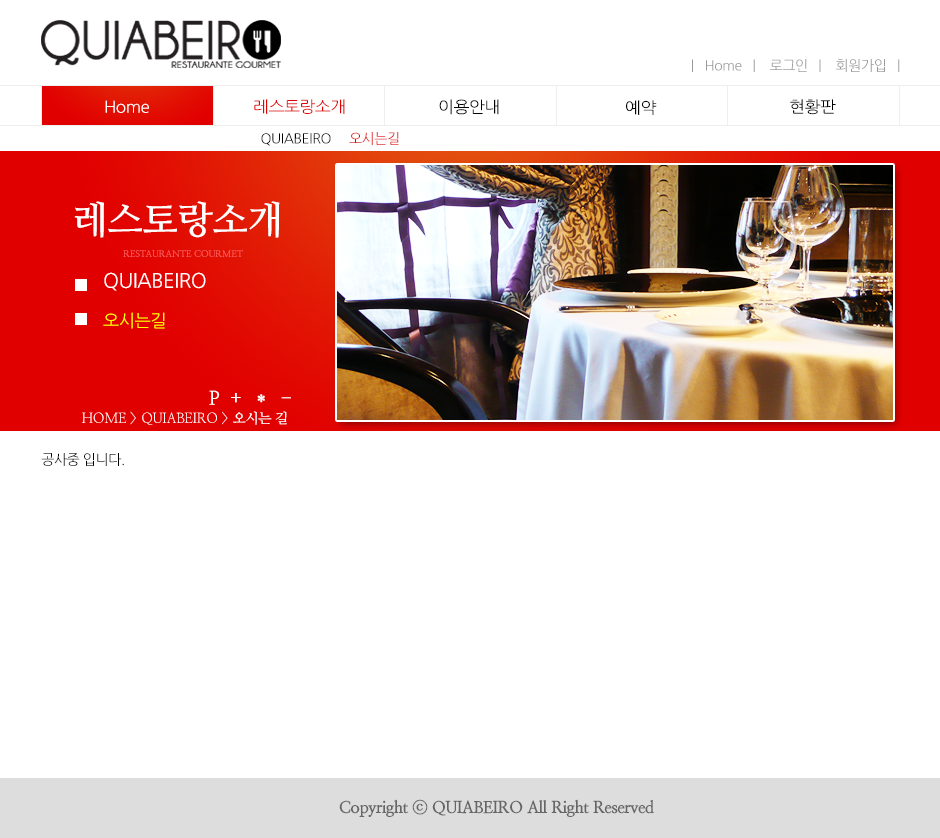
<style>
.page{position:relative;width:940px;height:838px;background:#ffffff}
.page>*{position:absolute;margin:0}
.t1{font:13.9px "NanumGothic";letter-spacing:-0.025em;color:#999999}
.t2{font:16px "NanumGothic";letter-spacing:-0.025em;color:#ffffff;scale:1.06 1}
.t3{font:16px "NanumGothic";letter-spacing:-0.025em;color:#e10301;scale:1.06 1}
.t4{font:16px "NanumGothic";letter-spacing:-0.025em;color:#000000;scale:1.06 1}
.t5{font:13.9px "NanumGothic";letter-spacing:-0.025em;color:#000000}
.t6{font:13.9px "NanumGothic";letter-spacing:-0.025em;color:#e10301}
.t7{font:38px "NanumMyeongjoBold";letter-spacing:-0.025em;color:#ffffff}
.t8{font:9.2px "NanumMyeongjoBold";letter-spacing:-0.025em;color:#ff6060;scale:1.03 1}
.t9{font:20px "NanumGothic";letter-spacing:-0.025em;color:#ffffff}
.t10{font:17px "NanumGothic";letter-spacing:-0.025em;color:#ffff00}
.t11{font:19.3px "NanumMyeongjoBold";letter-spacing:-0.025em;color:#ffffff}
.t12{font:13.9px "NanumMyeongjo";letter-spacing:-0.025em;color:#ffffff}
.t13{font:13.9px "NanumMyeongjoBold";letter-spacing:-0.025em;color:#ffffff}
.t14{font:16.5px "NanumMyeongjoExtraBold";letter-spacing:-0.025em;color:#666666}
</style>
<div class="page">
<p class="t1" style="left:692px;top:59px;width:208px;height:13px">|   Home   |    로그인   |    회원가입   |</p>
<p class="t2" style="left:105px;top:100px;width:44px;height:13px">Home</p>
<p class="t3" style="left:254px;top:99px;width:91px;height:15px">레스토랑소개</p>
<p class="t4" style="left:439px;top:99px;width:60px;height:16px">이용안내</p>
<p class="t4" style="left:626px;top:100px;width:31px;height:15px">예약</p>
<p class="t4" style="left:790px;top:99px;width:46px;height:16px">현황판</p>
<p class="t5" style="left:261px;top:132px;width:138px;height:14px">QUIABEIRO     <span class="t6">오시는길</span></p>
<p class="t7" style="left:74px;top:201px;width:206px;height:37px">레스토랑소개</p>
<p class="t8" style="left:123px;top:250px;width:120px;height:7px">RESTAURANTE COURMET</p>
<p class="t9" style="left:104px;top:272px;width:102px;height:19px">QUIABEIRO</p>
<p class="t10" style="left:103px;top:312px;width:62px;height:17px">오시는길</p>
<p class="t11" style="left:209px;top:390px;width:82px;height:15px">P  +  ＊  -</p>
<p class="t12" style="left:82px;top:411px;width:205px;height:14px">HOME &gt; QUIABEIRO &gt;<span class="t13"> 오시는 길</span></p>
<p class="t5" style="left:41px;top:453px;width:83px;height:13px">공사중 입니다.</p>
<p class="t14" style="left:339px;top:799px;width:315px;height:18px">Copyright ⓒ QUIABEIRO All Right Reserved</p>
</div>
